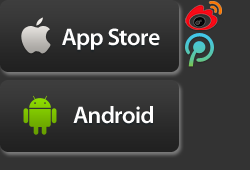
<style>
.page{position:relative;width:250px;height:170px;background:#333333}
.page>*{position:absolute;margin:0}
.t1{font:24px "MyriadPro-Semibold";letter-spacing:-0.025em;color:#fffefe}
</style>
<div class="page">
<p class="t1" style="left:62px;top:28px;width:98px;height:22px">App Store</p>
<p class="t1" style="left:73px;top:106px;width:80px;height:18px">Android</p>
</div>
